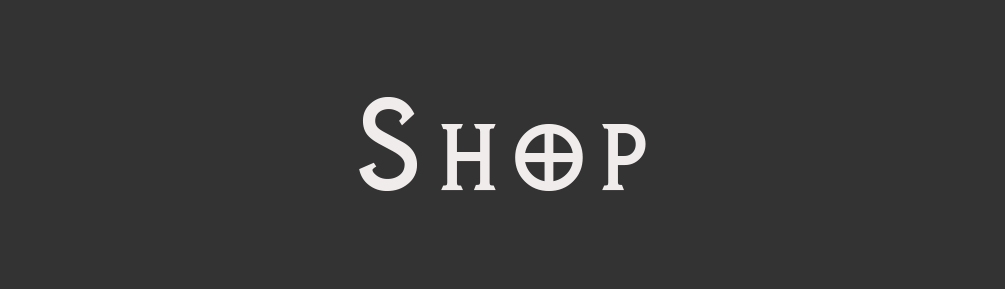
<style>
.page{position:relative;width:1005px;height:289px;background:#333333}
.page>*{position:absolute;margin:0}
.t1{font:150px "AvQest";color:#f0ecec}
</style>
<div class="page">
<p class="t1" style="left:359px;top:97px;width:287px;height:94px">Shop</p>
</div>
